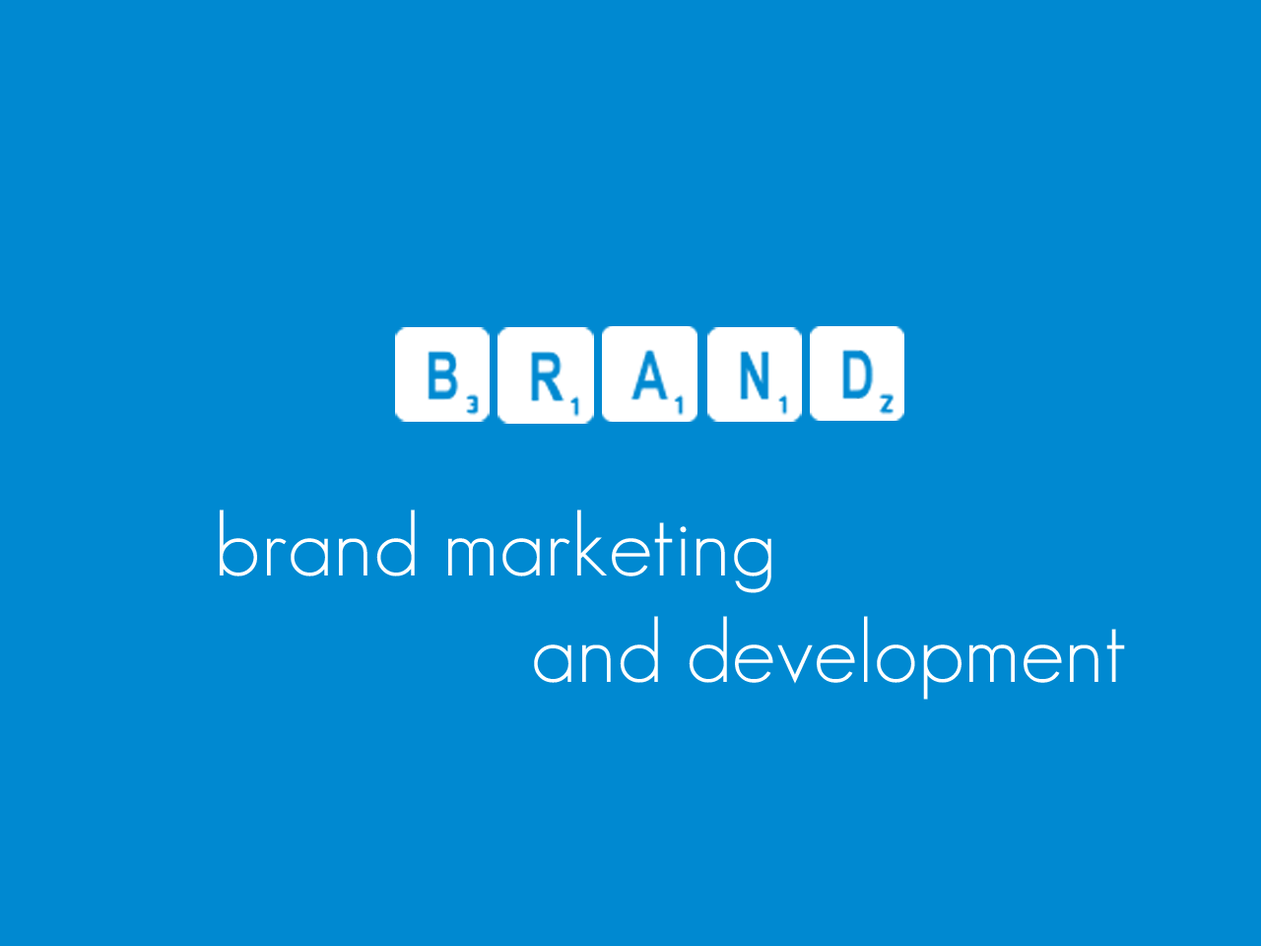
<style>
.page{position:relative;width:1261px;height:946px;background:#0089d1}
.page>*{position:absolute;margin:0}
.t1{font:88.7px "GeosansLight";color:#ffffff}
</style>
<div class="page">
<p class="t1" style="left:220px;top:509px;width:905px;height:190px">brand marketing<br>              and development</p>
</div>
